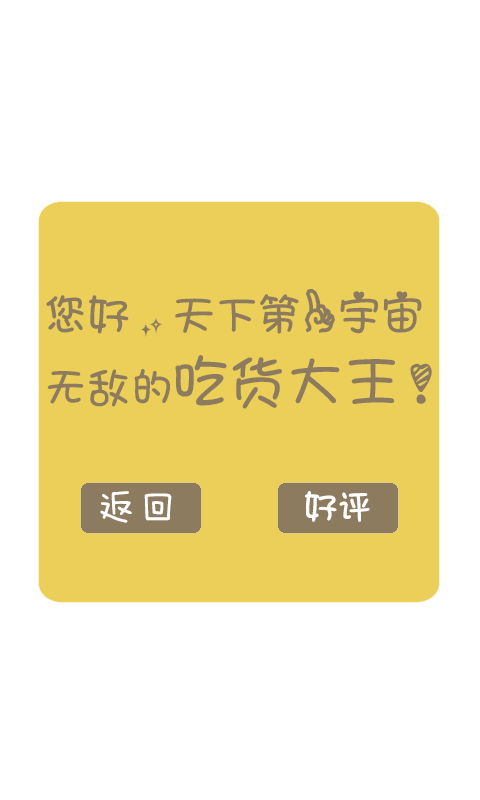
<style>
.page{position:relative;width:480px;height:800px;background:#ffffff}
.page>*{position:absolute;margin:0}
.t1{font:45px/60px "STHeitiTC-Light";color:#8c7b5f}
.t2{font:60px/60px "STHeitiTC-Light";color:#8c7b5f}
.t3{font:42px "FZMWJW--GB1-0";color:#ffffff}
</style>
<div class="page">
<p class="t1" style="left:46px;top:289px;width:386px;height:120px">您好，天下第一宇宙<br>无敌的<span class="t2">吃货大王</span>！</p>
<p class="t3" style="left:100px;top:491px;width:72px;height:32px">返回</p>
</div>
